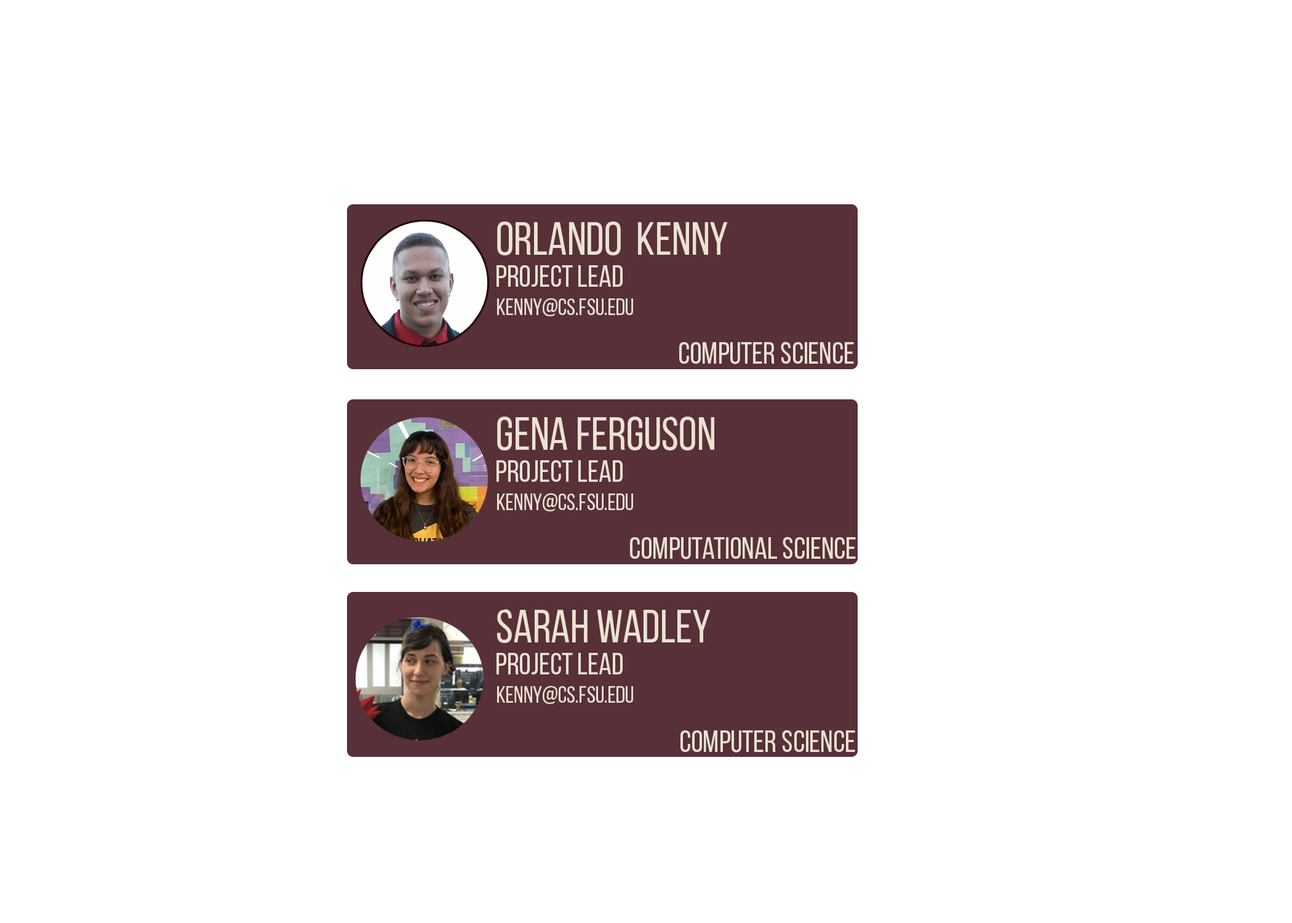
<style>
.page{position:relative;width:1292px;height:923px;background:#ffffff}
.page>*{position:absolute;margin:0}
.t1{font:46.1px "BebasNeueRegular";color:#eae3d1}
.t2{font:30.8px "BebasNeueRegular";color:#eae3d1}
.t3{font:23.1px "BebasNeueRegular";color:#eae3d1}
</style>
<div class="page">
<p class="t1" style="left:497px;top:221px;width:231px;height:34px">Orlando  Kenny</p>
<p class="t2" style="left:497px;top:265px;width:126px;height:22px">Project Lead</p>
<p class="t3" style="left:497px;top:298px;width:136px;height:18px">kenny@cs.fsu.edu</p>
<p class="t2" style="left:679px;top:341px;width:175px;height:23px">Computer science</p>
<p class="t1" style="left:497px;top:417px;width:217px;height:33px">GENA FERGUSON</p>
<p class="t2" style="left:497px;top:460px;width:126px;height:22px">Project Lead</p>
<p class="t3" style="left:497px;top:493px;width:136px;height:18px">kenny@cs.fsu.edu</p>
<p class="t2" style="left:630px;top:537px;width:226px;height:22px">Computational Science</p>
<p class="t1" style="left:497px;top:609px;width:214px;height:34px">SARAH WADLEY</p>
<p class="t2" style="left:497px;top:653px;width:126px;height:21px">Project Lead</p>
<p class="t3" style="left:497px;top:685px;width:136px;height:19px">kenny@cs.fsu.edu</p>
<p class="t2" style="left:680px;top:730px;width:175px;height:22px">Computer Science</p>
</div>
